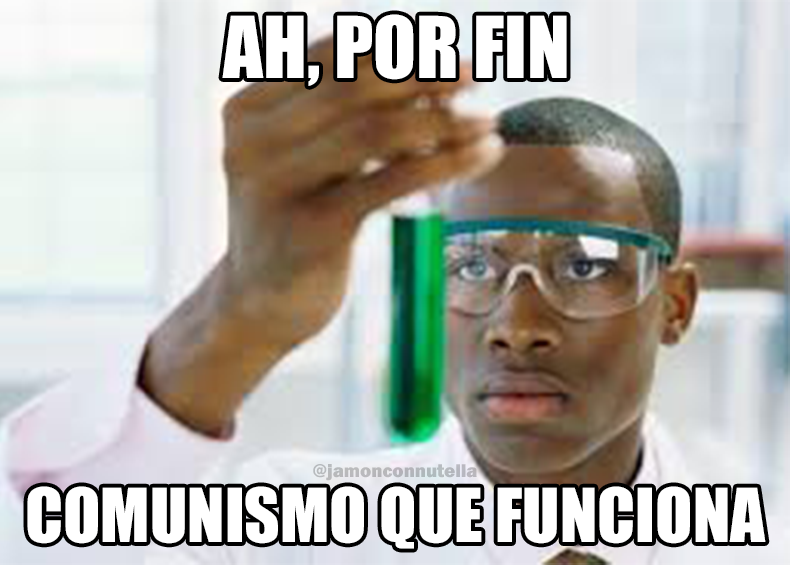
<style>
.page{position:relative;width:790px;height:565px}
.page>*{position:absolute;margin:0}
.t1{font:78.8px "Impact";color:#ffffff}
.t2{font:19px "FranklinGothic-Heavy";color:#b7b9bc}
.t3{font:68.8px "Impact";color:#ffffff}
</style>
<div class="page">
<p class="t1" style="left:222px;top:14px;width:345px;height:72px">AH, POR FIN</p>
<p class="t2" style="left:313px;top:464px;width:164px;height:17px">@jamonconnutella</p>
<p class="t3" style="left:27px;top:486px;width:739px;height:63px">COMUNISMO QUE FUNCIONA</p>
</div>
